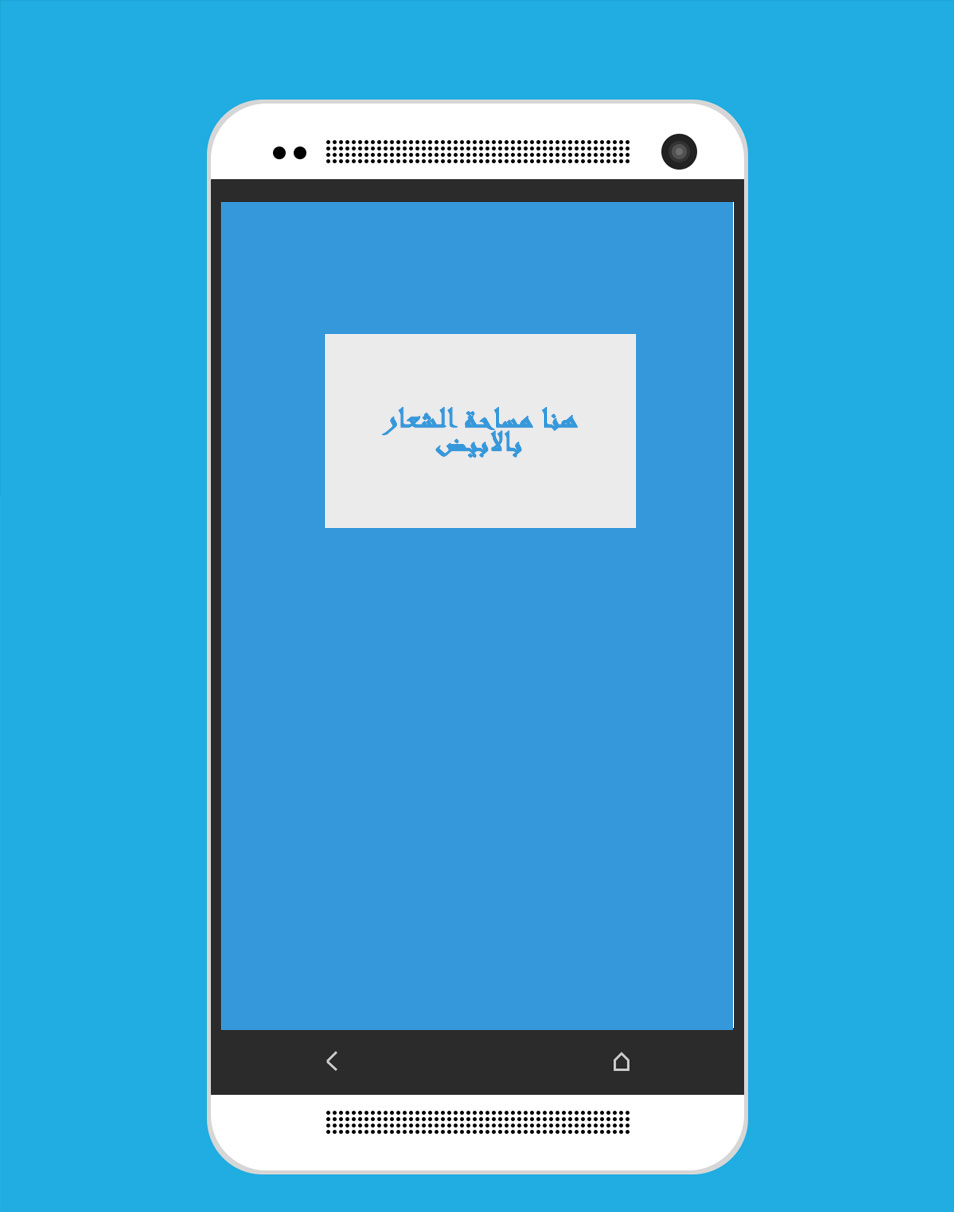
<style>
.page{position:relative;width:954px;height:1212px;background:#21ade2}
.page>*{position:absolute;margin:0}
.t1{font:32.3px/24px "Andalus";color:#3498db;font-weight:bold;scale:1.14 1}
</style>
<div class="page">
<p class="t1" style="left:382px;top:406px;width:196px;height:52px;text-align:right">هنا مساحة الشعار <br>بالابيض</p>
</div>
